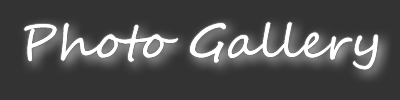
<style>
.page{position:relative;width:400px;height:100px;background:#333333}
.page>*{position:absolute;margin:0}
.t1{font:46.5px "SegoeScript";color:#ffffff;scale:1.03 1}
</style>
<div class="page">
<p class="t1" style="left:24px;top:22px;width:354px;height:48px">Photo Gallery</p>
<p class="t1" style="left:24px;top:22px;width:354px;height:48px">Photo Gallery</p>
</div>
